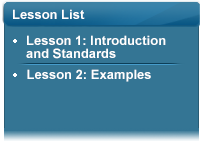
<style>
.page{position:relative;width:202px;height:141px;background:#347594}
.page>*{position:absolute;margin:0}
.t1{font:13px "Arial-BoldMT";color:#ffffff}
.t2{font:13px/13px "Arial-BoldMT";color:#ffffff}
</style>
<div class="page">
<p class="t1" style="left:13px;top:9px;width:72px;height:10px">Lesson List</p>
<p class="t2" style="left:26px;top:35px;width:140px;height:24px">Lesson 1: Introduction <br>and Standards</p>
<p class="t1" style="left:27px;top:69px;width:124px;height:13px">Lesson 2: Examples</p>
</div>
